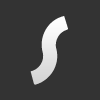
<style>
.page{position:relative;width:100px;height:100px;background:#333333}
.page>*{position:absolute;margin:0}
.t1{font:114.5px "Abode";color:#e9e9e9;font-weight:bold}
</style>
<div class="page">
<p class="t1" style="left:30px;top:16px;width:38px;height:69px;rotate:-15deg">s</p>
</div>
